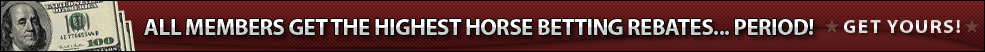
<style>
.page{position:relative;width:985px;height:52px}
.page>*{position:absolute;margin:0}
.t1{font:23px "MyriadPro-Bold";letter-spacing:-0.025em}
.t2{font:19px "MyriadPro-Bold";letter-spacing:0.1em;color:#e4e4e4}
</style>
<div class="page">
<p class="t1" style="left:144px;top:19px;width:670px;height:16px">ALL MEMBERS GET THE HIGHEST HORSE BETTING REBATES... PERIOD!</p>
<p class="t2" style="left:844px;top:20px;width:116px;height:13px">GET YOURS!</p>
</div>
